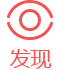
<style>
.page{position:relative;width:60px;height:70px;background:#ffffff}
.page>*{position:absolute;margin:0}
.t1{font:20.8px "MicrosoftYaHei";color:#f05454}
</style>
<div class="page">
<p class="t1" style="left:10px;top:49px;width:42px;height:20px">发现</p>
</div>
